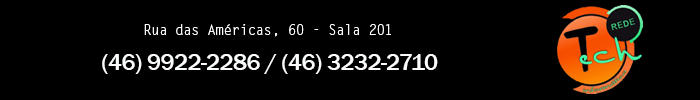
<style>
.page{position:relative;width:700px;height:100px;background:#000000}
.page>*{position:absolute;margin:0}
.t1{font:14px "LetterGothicStd";letter-spacing:-0.025em;color:#fbfdfd}
.t2{font:24px "FranklinGothic-Medium";letter-spacing:-0.025em;color:#fbfdfd}
</style>
<div class="page">
<p class="t1" style="left:144px;top:24px;width:247px;height:13px">Rua das Américas, 60 - Sala 201</p>
<p class="t2" style="left:102px;top:54px;width:336px;height:20px">(46) 9922-2286 / (46) 3232-2710</p>
</div>
